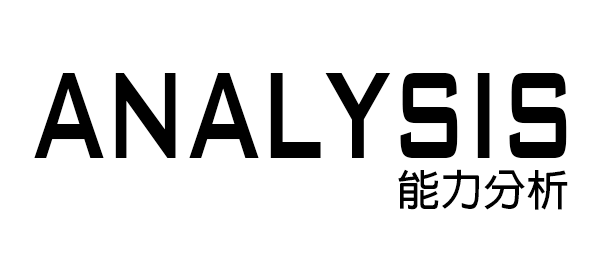
<style>
.page{position:relative;width:600px;height:266px;background:#ffffff}
.page>*{position:absolute;margin:0}
.t1{font:200px "BankGothicBT-Medium";color:#000000;scale:0.57 1}
.t2{font:42.9px "AdobeFanHeitiStd-Bold";color:#000000}
</style>
<div class="page">
<p class="t1" style="left:34px;top:73px;width:533px;height:85px">analysis</p>
<p class="t2" style="left:398px;top:169px;width:170px;height:41px">能力分析</p>
</div>
